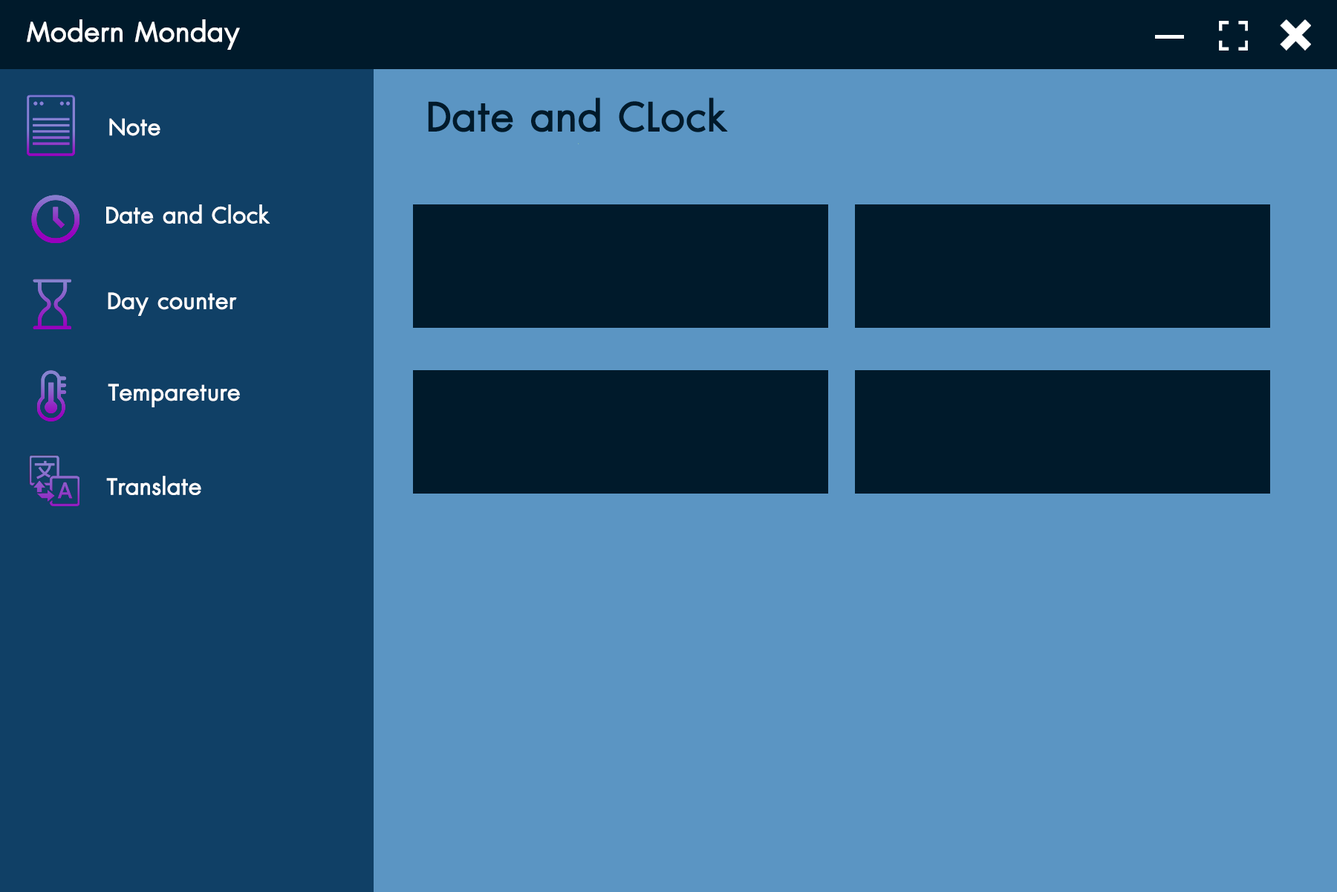
<style>
.page{position:relative;width:1337px;height:892px;background:#5b95c3}
.page>*{position:absolute;margin:0}
.t1{font:37.2px "DBAdmanX";color:#ffffff;font-weight:bold}
.t2{font:55.7px "DBAdmanX";color:#001a2b;font-weight:bold}
.t3{font:31px "DBAdmanX";color:#ffffff;font-weight:bold}
</style>
<div class="page">
<p class="t1" style="left:27px;top:19px;width:213px;height:31px">Modern Monday</p>
<p class="t2" style="left:428px;top:97px;width:300px;height:35px">Date and CLock</p>
<p class="t3" style="left:109px;top:118px;width:51px;height:18px">Note</p>
<p class="t3" style="left:106px;top:204px;width:164px;height:20px">Date and Clock</p>
<p class="t3" style="left:108px;top:292px;width:129px;height:24px">Day counter</p>
<p class="t3" style="left:108px;top:383px;width:132px;height:24px">Tempareture</p>
<p class="t3" style="left:106px;top:476px;width:95px;height:20px">Translate</p>
</div>
